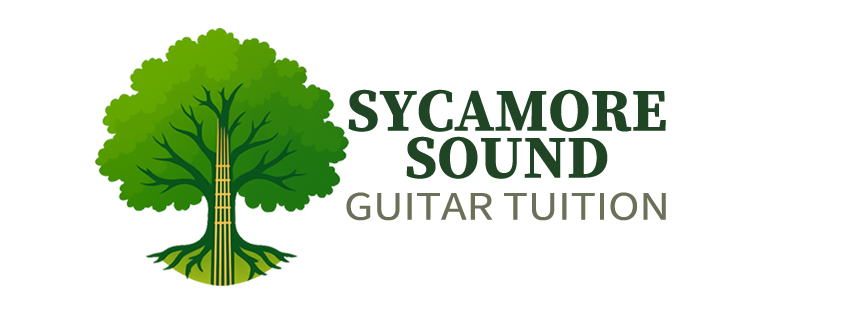
<style>
.page{position:relative;width:851px;height:315px;background:#ffffff}
.page>*{position:absolute;margin:0}
.t1{font:60px "SourceSerif4Roman-Bold";color:#204524}
.t2{font:40.7px "SourceSansRoman-Regular";color:#6b7059;scale:1.16 1}
</style>
<div class="page">
<p class="t1" style="left:348px;top:89px;width:318px;height:90px;text-align:center">SYCAMORE<br>SOUND</p>
<p class="t2" style="left:346px;top:192px;width:320px;height:29px">GUITAR TUITION</p>
</div>
